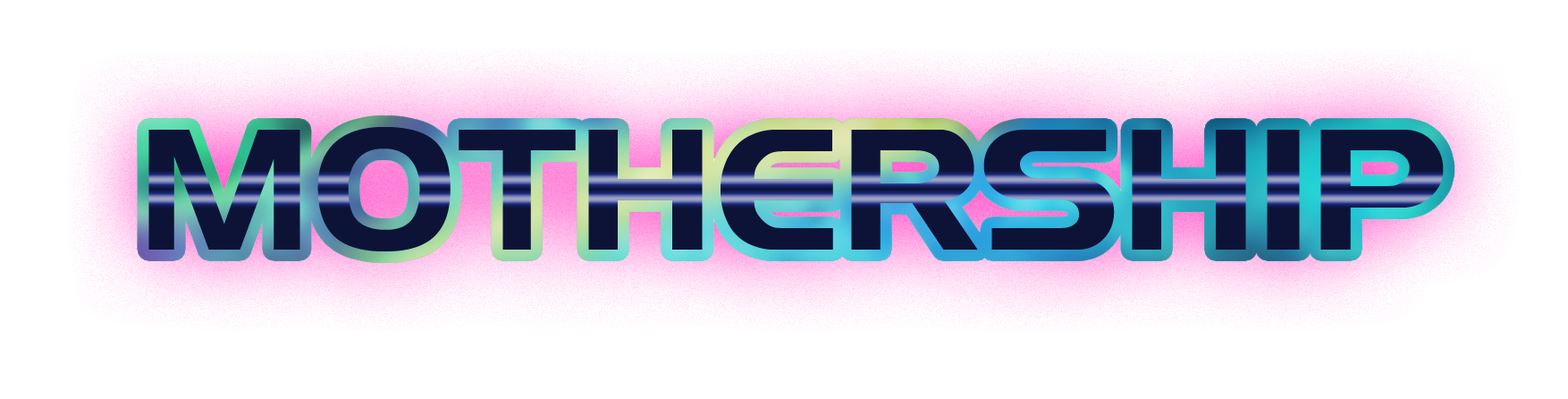
<style>
.page{position:relative;width:1568px;height:399px;background:#ffffff}
.page>*{position:absolute;margin:0}
.t1{font:171.6px "Denmark";letter-spacing:0.025em;color:#0d1337}
</style>
<div class="page">
<p class="t1" style="left:148px;top:127px;width:1296px;height:124px">MOTHERSHIP</p>
</div>
